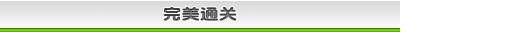
<style>
.page{position:relative;width:512px;height:32px;background:#ffffff}
.page>*{position:absolute;margin:0}
.t1{font:14.9px "DFPYuanW9";scale:1.25 1}
</style>
<div class="page">
<p class="t1" style="left:163px;top:6px;width:74px;height:15px">完美通关</p>
</div>
